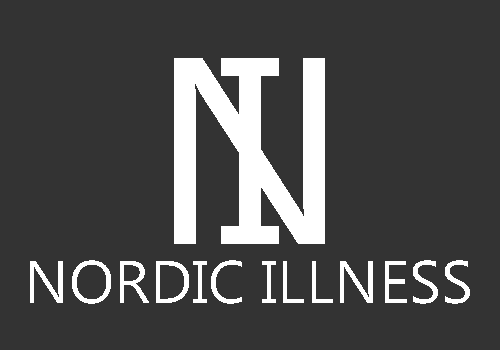
<style>
.page{position:relative;width:500px;height:350px;background:#333333}
.page>*{position:absolute;margin:0}
.t1{font:266.5px "MicrosoftNewTaiLue";color:#ffffff}
.t2{font:60px "MicrosoftNewTaiLue";color:#ffffff}
</style>
<div class="page">
<p class="t1" style="left:174px;top:58px;width:151px;height:186px">N</p>
<p class="t1" style="left:221px;top:58px;width:58px;height:186px">I</p>
<p class="t2" style="left:30px;top:260px;width:440px;height:44px">NORDIC ILLNESS</p>
</div>
